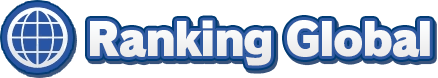
<style>
.page{position:relative;width:438px;height:78px;background:#ffffff}
.page>*{position:absolute;margin:0}
.t1{font:45.3px "RodinPro-UB";letter-spacing:-0.044em;color:#f3f3f4}
</style>
<div class="page">
<p class="t1" style="left:90px;top:20px;width:340px;height:46px">Ranking Global</p>
</div>
